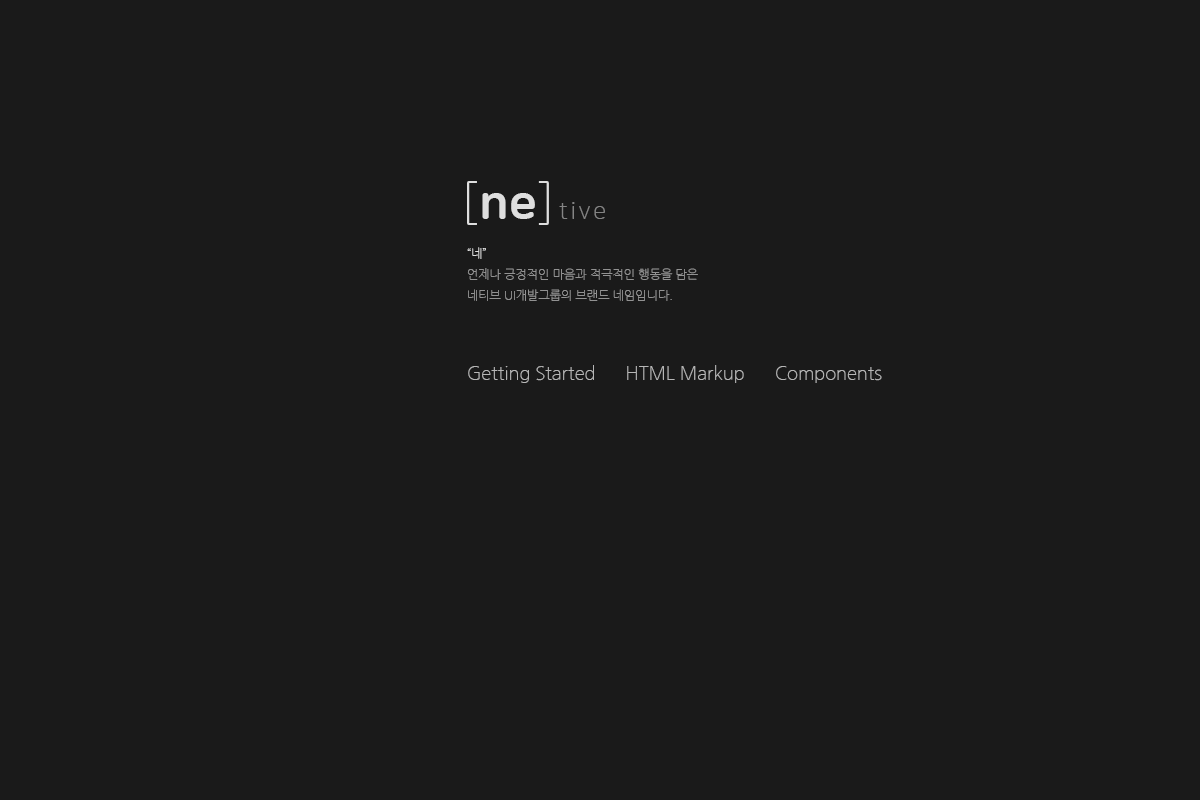
<style>
.page{position:relative;width:1200px;height:800px;background:#1a1a1a}
.page>*{position:absolute;margin:0}
.t1{font:48px "NanumSquareRoundEB";color:#dedede}
.t2{font:48px "NanumSquareRoundL";color:#dedede}
.t3{font:24px "NanumSquareRoundL";letter-spacing:0.1em;color:#858585}
.t4{font:12px "NanumGothicLight";color:#929292}
.t5{font:12px "NanumGothicLight";color:#dedede}
.t6{font:18px "NanumGothicLight";color:#b6b6b6}
</style>
<div class="page">
<p class="t1" style="left:467px;top:181px;width:82px;height:44px"><span class="t2">[</span>ne<span class="t2">]</span></p>
<p class="t3" style="left:559px;top:202px;width:46px;height:17px">tive</p>
<p class="t4" style="left:467px;top:247px;width:231px;height:54px"><span class="t5">“네”<br></span>언제나 긍정적인 마음과 적극적인 행동을 담은 <br>네티브 UI개발그룹의 브랜드 네임입니다.</p>
<p class="t6" style="left:468px;top:365px;width:414px;height:18px">Getting Started      HTML Markup      Components</p>
</div>
